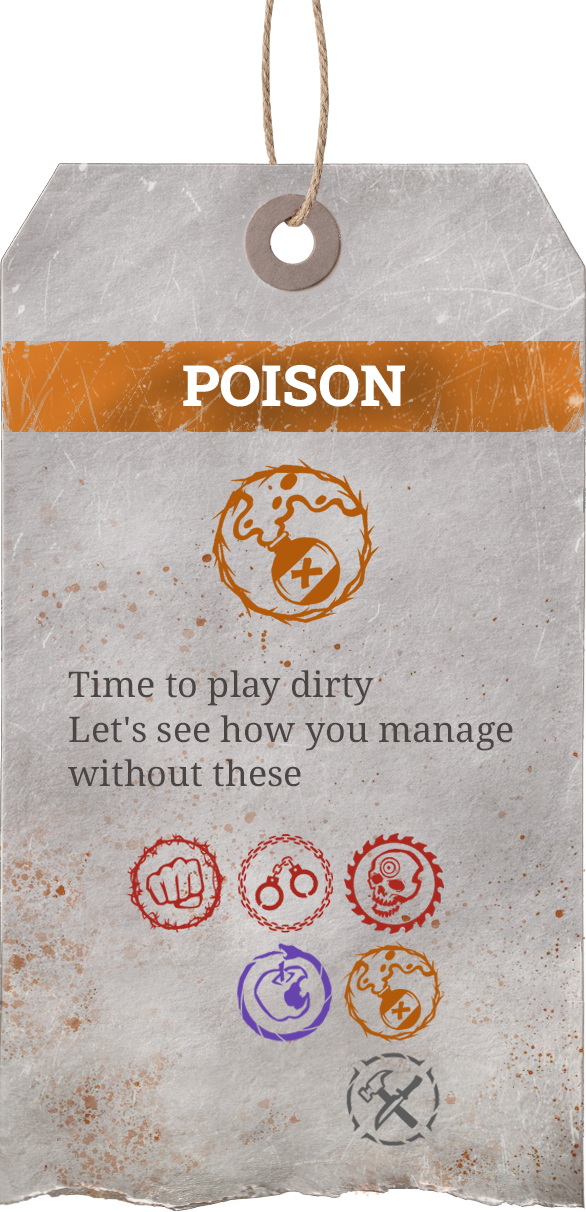
<style>
.page{position:relative;width:586px;height:1212px}
.page>*{position:absolute;margin:0}
.t1{font:57.1px "RobotoSlab-ExtraBold";color:#ffffff}
.t2{font:35.3px/44.6px "NotoSerif-Medium";color:#4b4544}
</style>
<div class="page">
<p class="t1" style="left:183px;top:364px;width:222px;height:43px">POISON</p>
<p class="t2" style="left:68px;top:670px;width:445px;height:117px">Time to play dirty<br>Let's see how you manage without these</p>
</div>
